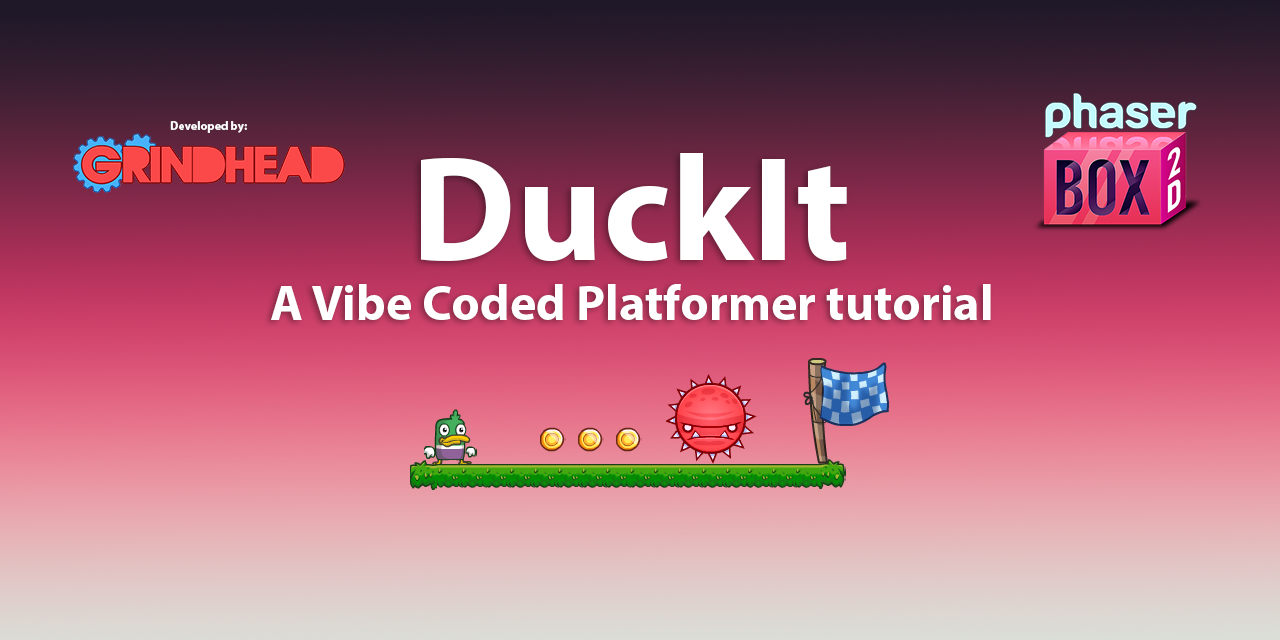
<style>
.page{position:relative;width:1280px;height:640px}
.page>*{position:absolute;margin:0}
.t1{font:12px "MyriadPro-Bold";color:#ffffff}
.t2{font:50px "MyriadPro-Bold";color:#ffffff}
.t3{font:150px "MyriadPro-Bold";color:#ffffff}
.t4{font:60px "MyriadPro-Bold";color:#ffffff}
</style>
<div class="page">
<p class="t1" style="left:170px;top:121px;width:77px;height:12px">Developed by:</p>
<p class="t2" style="left:271px;top:153px;width:720px;height:167px;text-align:center"><span class="t3">DuckIt</span><span class="t4"> <br></span>A Vibe Coded Platformer tutorial</p>
</div>
